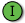
<style>
.page{position:relative;width:25px;height:23px;background:#65ba4a}
.page>*{position:absolute;margin:0}
.t1{font:14px "Verdana";color:#000000}
</style>
<div class="page">
<p class="t1" style="left:10px;top:5px;width:5px;height:11px">I</p>
</div>
